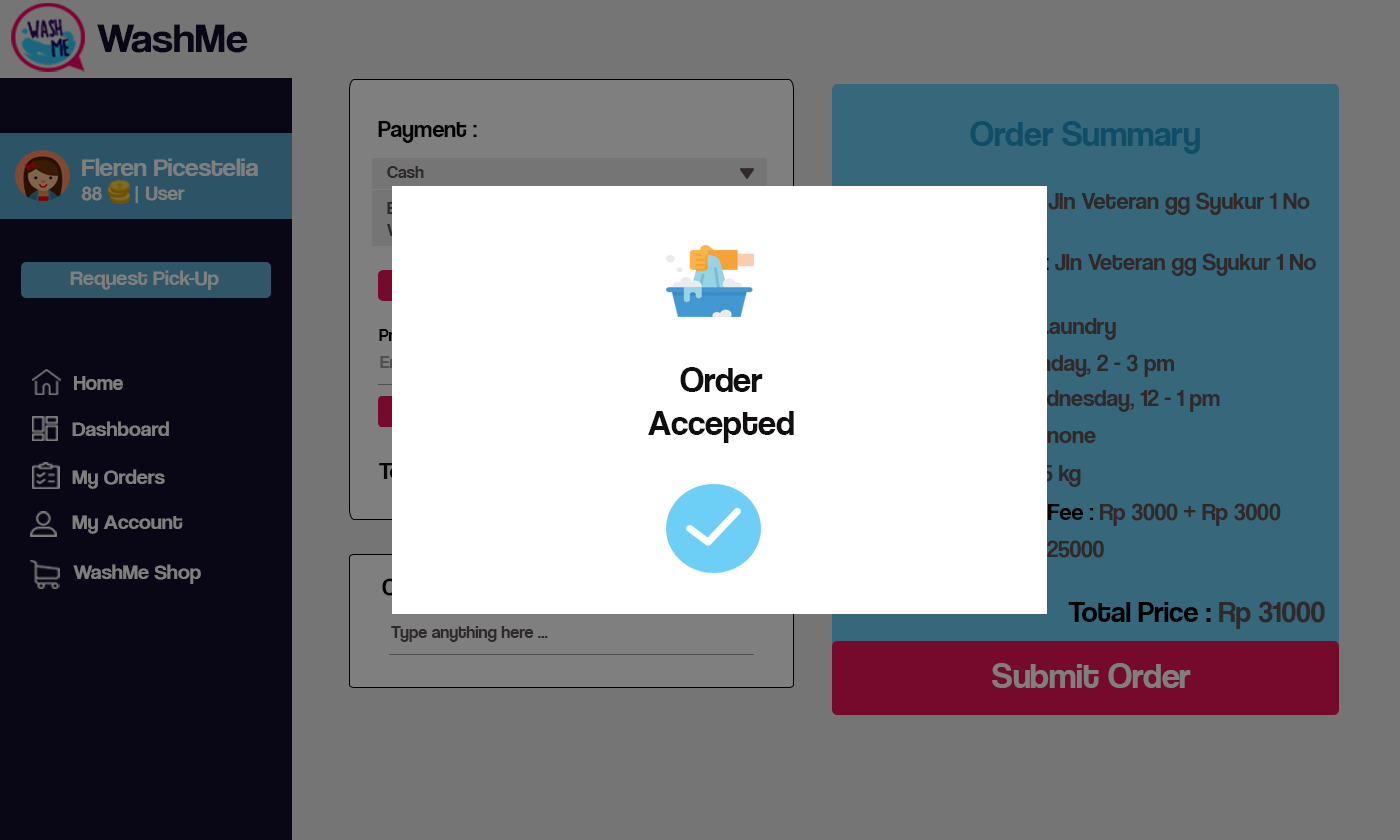
<style>
.page{position:relative;width:1400px;height:840px;background:#757575}
.page>*{position:absolute;margin:0}
.t1{font:42.1px "CoolveticaRg-Regular";color:#120f2b;scale:1.05 1}
.t2{font:24px "CoolveticaRg-Regular";color:#000000}
.t3{font:36px "CoolveticaRg-Regular";color:#104e67}
.t4{font:25.2px "CoolveticaRg-Regular";color:#7f7f7f;scale:1.05 1}
.t5{font:20px "CoolveticaRg-Regular";color:#7f7f7f;scale:1.05 1}
.t6{font:18px "CoolveticaRg-Regular";color:#302929}
.t7{font:21px "CoolveticaRg-Regular";color:#7f7f7f;scale:1.05 1}
.t8{font:21px "CoolveticaRg-Regular";color:#7f7f7f}
.t9{font:36px "CoolveticaRg-Regular";color:#100e0e}
.t10{font:30px "CoolveticaRg-Regular"}
.t11{font:17.8px "CoolveticaRg-Regular";color:#302929}
.t12{font:36px "CoolveticaRg-Regular";color:#7f7f7f}
</style>
<div class="page">
<p class="t1" style="left:97px;top:24px;width:151px;height:29px">WashMe</p>
<p class="t2" style="left:378px;top:121px;width:99px;height:22px">Payment :</p>
<p class="t3" style="left:970px;top:121px;width:230px;height:33px">Order Summary</p>
<p class="t4" style="left:81px;top:158px;width:177px;height:45px">Fleren Picestelia<br><span class="t5">88      | User</span></p>
<p class="t6" style="left:387px;top:166px;width:37px;height:12px">Cash</p>
<p class="t7" style="left:70px;top:270px;width:149px;height:20px">Request Pick-Up</p>
<p class="t8" style="left:74px;top:376px;width:49px;height:14px">Home</p>
<p class="t9" style="left:648px;top:367px;width:146px;height:76px;text-align:center">Order<br>Accepted</p>
<p class="t7" style="left:72px;top:421px;width:97px;height:15px">Dashboard</p>
<p class="t7" style="left:72px;top:469px;width:93px;height:20px">My Orders</p>
<p class="t7" style="left:72px;top:515px;width:111px;height:19px">My Account</p>
<p class="t7" style="left:73px;top:564px;width:128px;height:20px">WashMe Shop</p>
<p class="t10" style="left:1068px;top:601px;width:257px;height:28px">Total Price : Rp 31000</p>
<p class="t11" style="left:391px;top:626px;width:157px;height:16px">Type anything here ...</p>
<p class="t12" style="left:992px;top:663px;width:199px;height:25px">Submit Order</p>
</div>
